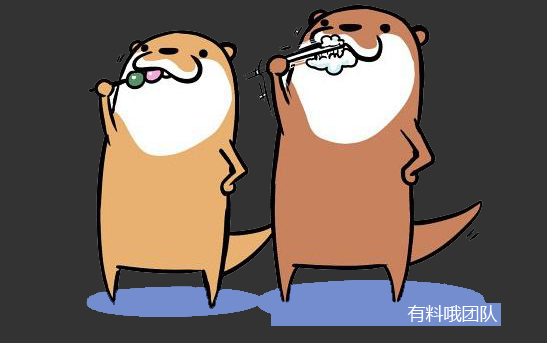
<style>
.page{position:relative;width:547px;height:343px;background:#333333}
.page>*{position:absolute;margin:0}
.t1{font:18px "MicrosoftYaHei";color:#ffffff}
</style>
<div class="page">
<p class="t1" style="left:407px;top:305px;width:91px;height:17px">有料哦团队</p>
</div>
